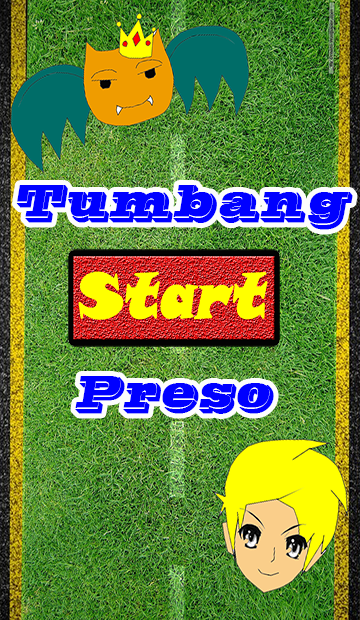
<style>
.page{position:relative;width:360px;height:620px}
.page>*{position:absolute;margin:0}
.t1{font:46.2px "VinetaBT-Regular";color:#0000ff;font-weight:bold;font-style:italic;scale:0.94 1}
</style>
<div class="page">
<p class="t1" style="left:16px;top:185px;width:337px;height:45px">Tumbang</p>
<p class="t1" style="left:75px;top:376px;width:199px;height:38px">Preso</p>
</div>
